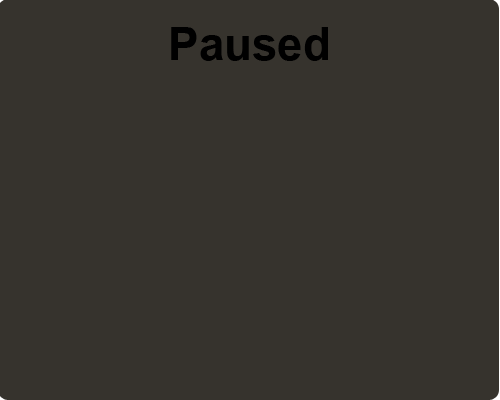
<style>
.page{position:relative;width:500px;height:400px;background:#36332d}
.page>*{position:absolute;margin:0}
.t1{font:70px "BrowalliaUPC-Bold";color:#000000}
</style>
<div class="page">
<p class="t1" style="left:171px;top:27px;width:157px;height:34px">Paused</p>
</div>
